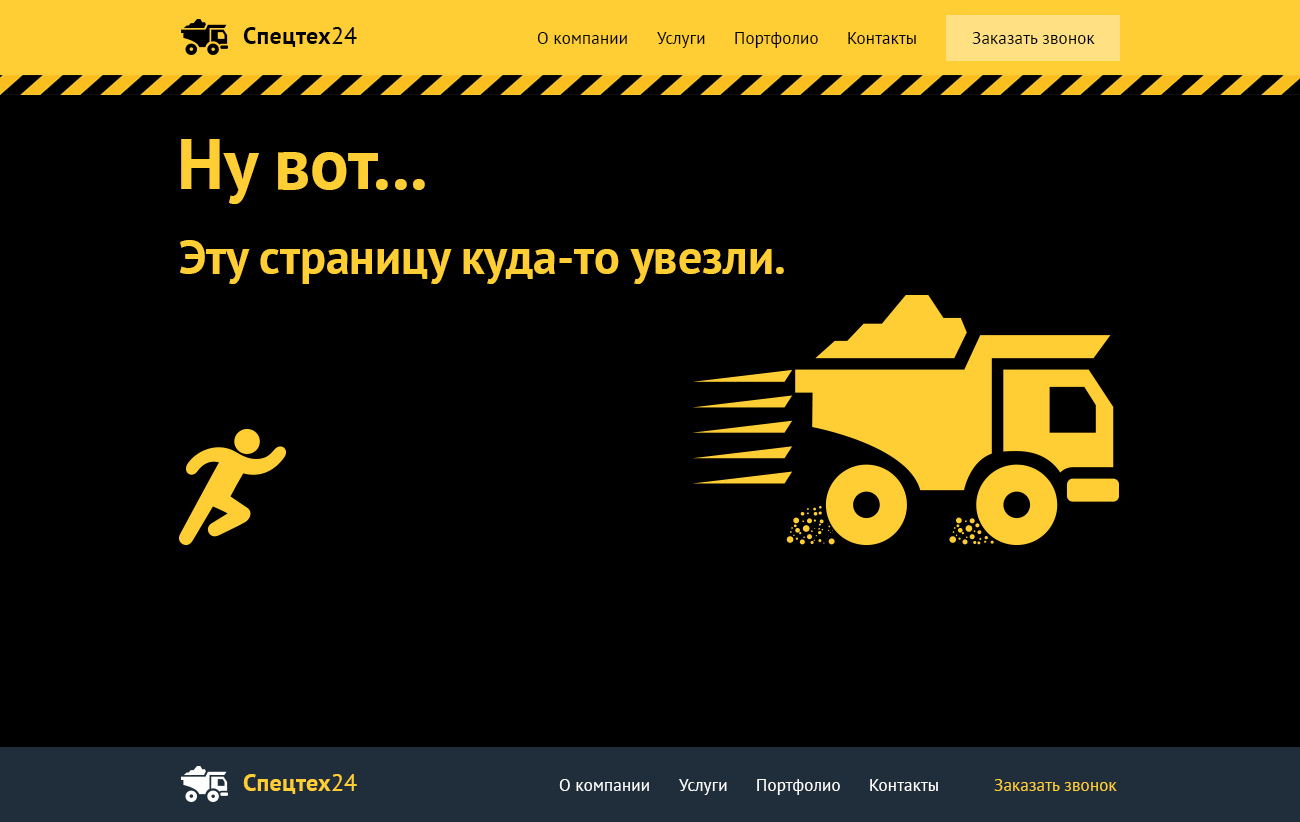
<style>
.page{position:relative;width:1300px;height:822px;background:#000000}
.page>*{position:absolute;margin:0}
.t1{font:24px "PTSans-Bold";letter-spacing:0.01em;color:#000000}
.t2{font:24px "PTSans-Regular";letter-spacing:0.01em;color:#000000}
.t3{font:17px "PTSans-Regular";letter-spacing:0.01em;color:#000000}
.t4{font:72px "PTSans-Bold";color:#ffcd34}
.t5{font:48px "PTSans-Bold";color:#ffcd34}
.t6{font:24px "PTSans-Bold";letter-spacing:0.01em;color:#ffcd34}
.t7{font:24px "PTSans-Regular";letter-spacing:0.01em;color:#ffcd34}
.t8{font:17px "PTSans-Regular";letter-spacing:0.01em;color:#ffffff}
.t9{font:17px "PTSans-Regular";letter-spacing:0.01em;color:#ffcd34}
</style>
<div class="page">
<p class="t1" style="left:243px;top:27px;width:114px;height:20px">Спецтех<span class="t2">24</span></p>
<p class="t3" style="left:537px;top:32px;width:90px;height:12px">О компании</p>
<p class="t3" style="left:657px;top:32px;width:48px;height:16px">Услуги</p>
<p class="t3" style="left:735px;top:32px;width:83px;height:16px">Портфолио</p>
<p class="t3" style="left:848px;top:32px;width:68px;height:12px">Контакты</p>
<p class="t3" style="left:972px;top:32px;width:123px;height:12px">Заказать звонок</p>
<p class="t4" style="left:181px;top:139px;width:244px;height:65px">Ну вот...</p>
<p class="t5" style="left:180px;top:240px;width:604px;height:44px">Эту страницу куда-то увезли.</p>
<p class="t6" style="left:243px;top:774px;width:114px;height:20px">Спецтех<span class="t7">24</span></p>
<p class="t8" style="left:559px;top:779px;width:90px;height:12px">О компании</p>
<p class="t8" style="left:679px;top:779px;width:48px;height:16px">Услуги</p>
<p class="t8" style="left:757px;top:779px;width:83px;height:16px">Портфолио</p>
<p class="t8" style="left:870px;top:779px;width:68px;height:12px">Контакты</p>
<p class="t9" style="left:994px;top:779px;width:123px;height:12px">Заказать звонок</p>
</div>
